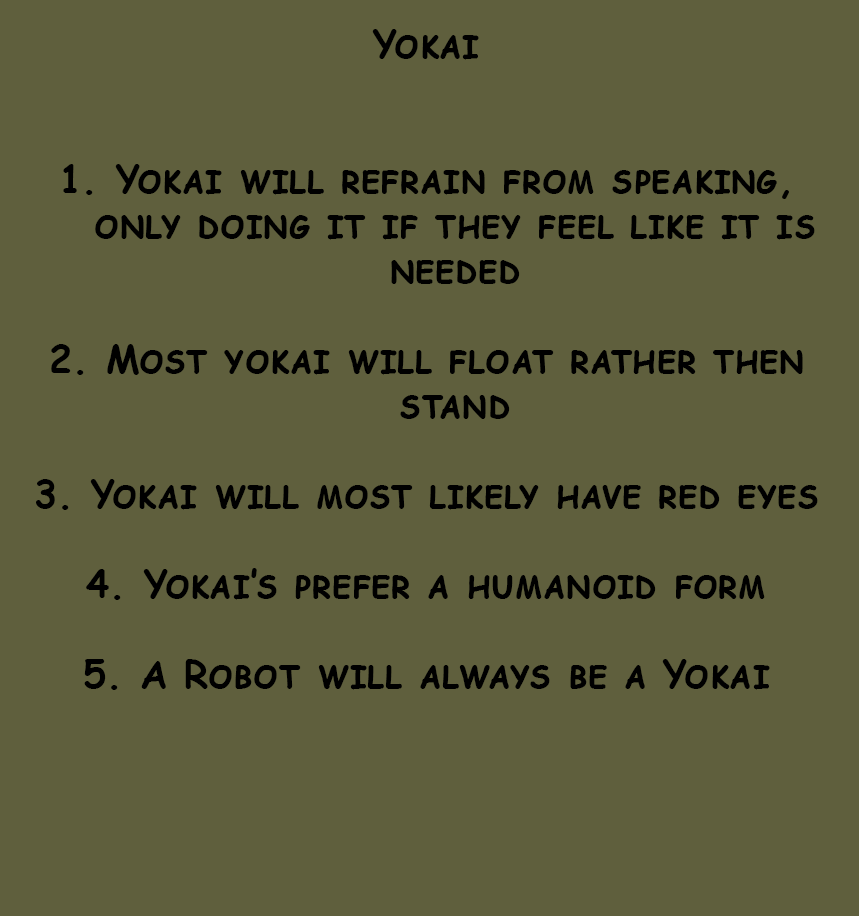
<style>
.page{position:relative;width:859px;height:916px;background:#5f5f3d}
.page>*{position:absolute;margin:0}
.t1{font:37.5px "ComicSansMS-Bold";color:#000000;font-variant:small-caps}
</style>
<div class="page">
<p class="t1" style="left:36px;top:29px;width:782px;height:661px;text-align:center">Yokai<br><br><br>Yokai will refrain from speaking, only doing it if they feel like it is needed<br><br>Most yokai will float rather then stand<br><br>Yokai will most likely have red eyes<br><br>Yokai’s prefer a humanoid form<br><br>A Robot will always be a Yokai</p>
</div>
